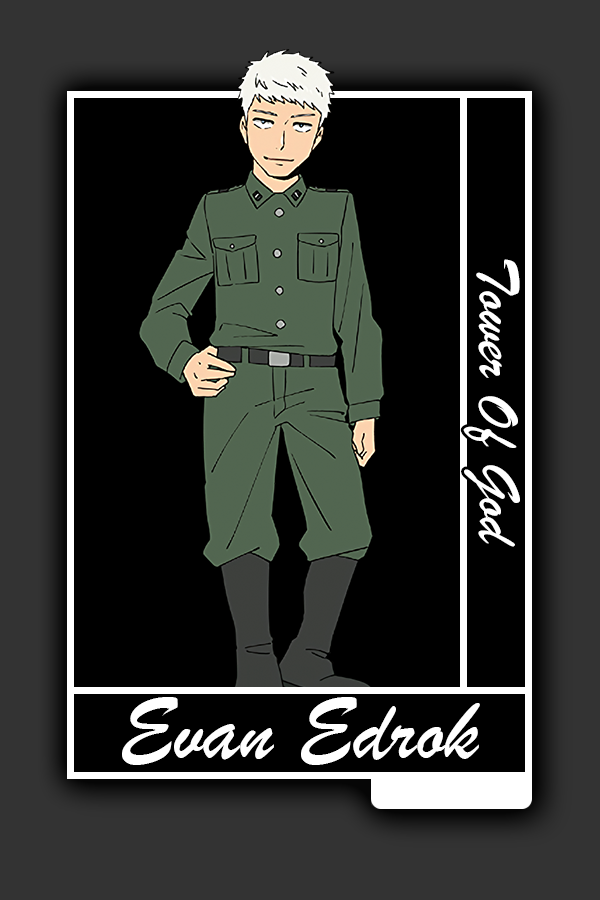
<style>
.page{position:relative;width:600px;height:900px;background:#000000}
.page>*{position:absolute;margin:0}
.t1{font:61.5px "BrushScriptMT";color:#ffffff}
.t2{font:89.7px "BrushScriptMT";color:#ffffff}
</style>
<div class="page">
<p class="t1" style="left:463px;top:259px;width:57px;height:288px;rotate:90deg">Tower Of God</p>
<p class="t2" style="left:122px;top:697px;width:358px;height:68px">Evan Edrok</p>
</div>
